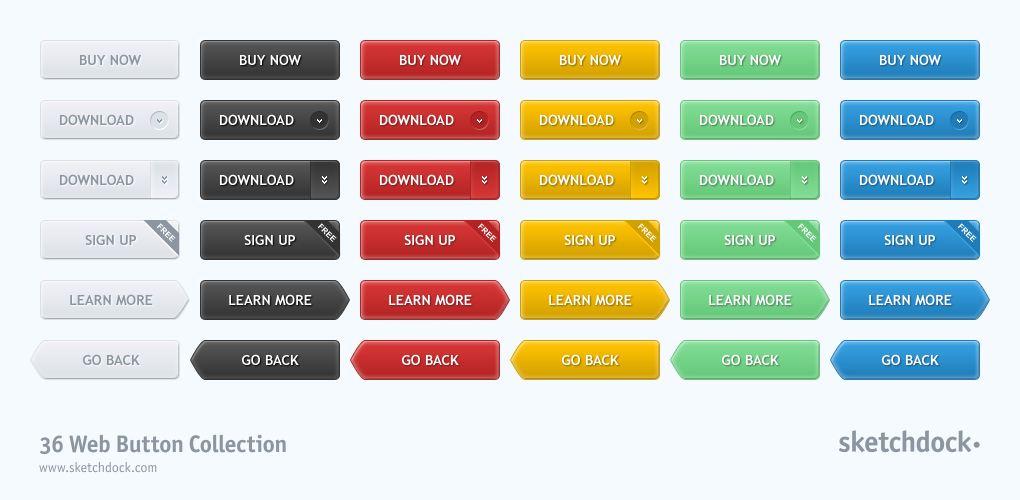
<style>
.page{position:relative;width:1020px;height:500px;background:#f5faff}
.page>*{position:absolute;margin:0}
.t1{font:14px "TrebuchetMS-Bold";color:#8c96a0;text-transform:uppercase}
.t2{font:14px "TrebuchetMS-Bold";color:#ffffff;text-transform:uppercase}
.t3{font:8px "Arial-BoldMT";color:#ffffff;text-transform:uppercase}
</style>
<div class="page">
<p class="t1" style="left:80px;top:54px;width:61px;height:11px">Buy now</p>
<p class="t2" style="left:240px;top:54px;width:61px;height:11px">Buy now</p>
<p class="t2" style="left:400px;top:54px;width:61px;height:11px">Buy now</p>
<p class="t2" style="left:560px;top:54px;width:61px;height:11px">Buy now</p>
<p class="t2" style="left:720px;top:54px;width:61px;height:11px">Buy now</p>
<p class="t2" style="left:880px;top:54px;width:61px;height:11px">Buy now</p>
<p class="t1" style="left:60px;top:114px;width:74px;height:11px">Download</p>
<p class="t2" style="left:220px;top:114px;width:74px;height:11px">Download</p>
<p class="t2" style="left:380px;top:114px;width:74px;height:11px">Download</p>
<p class="t2" style="left:540px;top:114px;width:74px;height:11px">Download</p>
<p class="t2" style="left:700px;top:114px;width:74px;height:11px">Download</p>
<p class="t2" style="left:860px;top:114px;width:74px;height:11px">Download</p>
<p class="t1" style="left:60px;top:174px;width:74px;height:11px">Download</p>
<p class="t2" style="left:220px;top:174px;width:74px;height:11px">Download</p>
<p class="t2" style="left:380px;top:174px;width:74px;height:11px">Download</p>
<p class="t2" style="left:540px;top:174px;width:74px;height:11px">Download</p>
<p class="t2" style="left:700px;top:174px;width:74px;height:11px">Download</p>
<p class="t2" style="left:860px;top:174px;width:74px;height:11px">Download</p>
<p class="t3" style="left:156px;top:223px;width:20px;height:19px;rotate:45deg">Free</p>
<p class="t3" style="left:317px;top:223px;width:20px;height:19px;rotate:45deg">Free</p>
<p class="t3" style="left:477px;top:223px;width:20px;height:19px;rotate:45deg">Free</p>
<p class="t3" style="left:637px;top:223px;width:20px;height:19px;rotate:45deg">Free</p>
<p class="t3" style="left:797px;top:223px;width:20px;height:19px;rotate:45deg">Free</p>
<p class="t3" style="left:957px;top:223px;width:20px;height:19px;rotate:45deg">Free</p>
<p class="t1" style="left:85px;top:235px;width:51px;height:10px">Sign up</p>
<p class="t2" style="left:244px;top:235px;width:51px;height:10px">Sign up</p>
<p class="t2" style="left:404px;top:235px;width:51px;height:10px">Sign up</p>
<p class="t2" style="left:564px;top:235px;width:51px;height:10px">Sign up</p>
<p class="t2" style="left:724px;top:235px;width:51px;height:10px">Sign up</p>
<p class="t2" style="left:884px;top:235px;width:51px;height:10px">Sign up</p>
<p class="t1" style="left:70px;top:294px;width:83px;height:11px">Learn more</p>
<p class="t2" style="left:229px;top:294px;width:83px;height:11px">Learn more</p>
<p class="t2" style="left:389px;top:294px;width:83px;height:11px">Learn more</p>
<p class="t2" style="left:549px;top:294px;width:83px;height:11px">Learn more</p>
<p class="t2" style="left:709px;top:294px;width:83px;height:11px">Learn More</p>
<p class="t2" style="left:869px;top:294px;width:83px;height:11px">Learn more</p>
<p class="t1" style="left:83px;top:354px;width:57px;height:11px">Go back</p>
<p class="t2" style="left:242px;top:354px;width:57px;height:11px">Go back</p>
<p class="t2" style="left:402px;top:354px;width:57px;height:11px">Go back</p>
<p class="t2" style="left:562px;top:354px;width:57px;height:11px">Go back</p>
<p class="t2" style="left:722px;top:354px;width:57px;height:11px">Go back</p>
<p class="t2" style="left:882px;top:354px;width:57px;height:11px">Go back</p>
</div>
